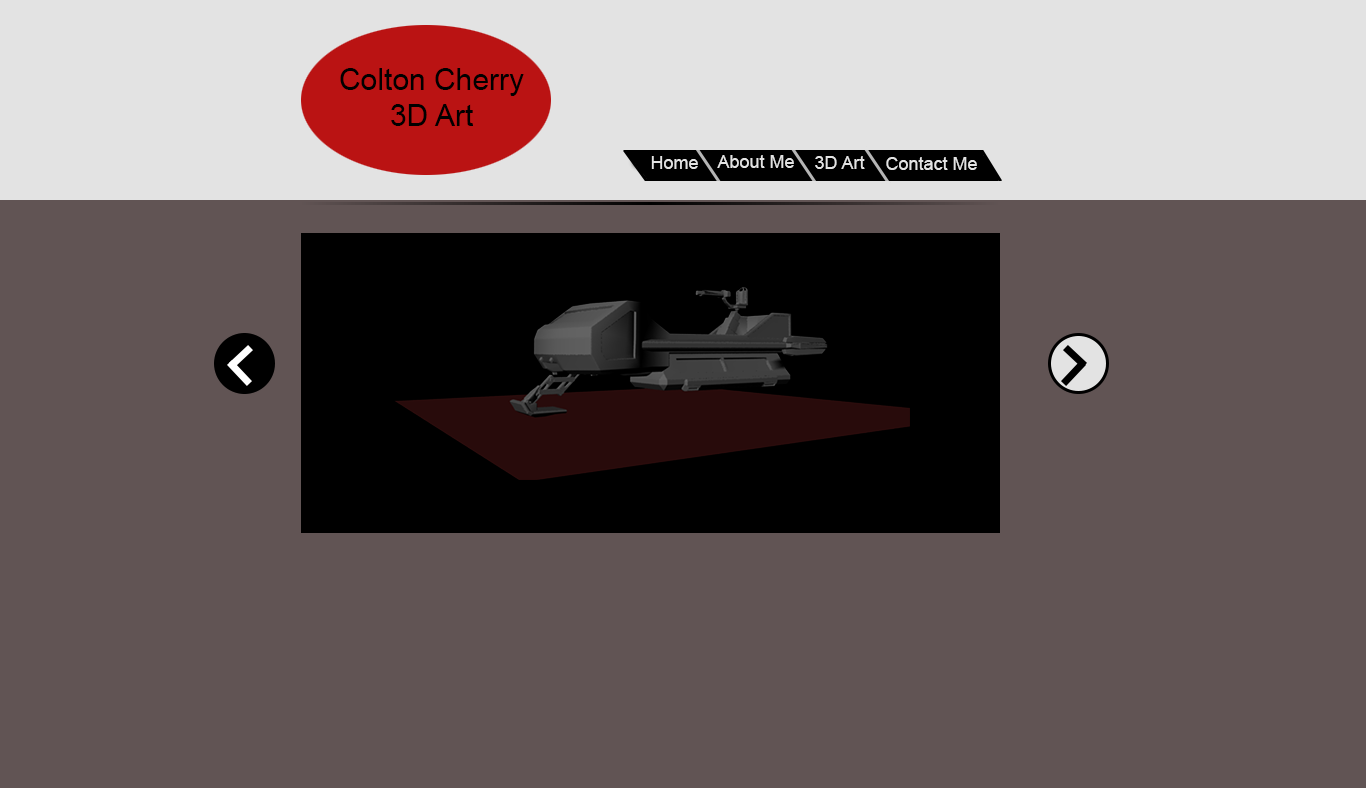
<style>
.page{position:relative;width:1366px;height:788px;background:#615454}
.page>*{position:absolute;margin:0}
.t1{font:18px "ArialMT";color:#e3e3e3}
</style>
<div class="page">
<p class="t1" style="left:651px;top:156px;width:47px;height:13px">Home</p>
<p class="t1" style="left:717px;top:155px;width:77px;height:13px">About Me</p>
<p class="t1" style="left:815px;top:156px;width:50px;height:13px">3D Art</p>
<p class="t1" style="left:886px;top:157px;width:91px;height:13px">Contact Me</p>
</div>
